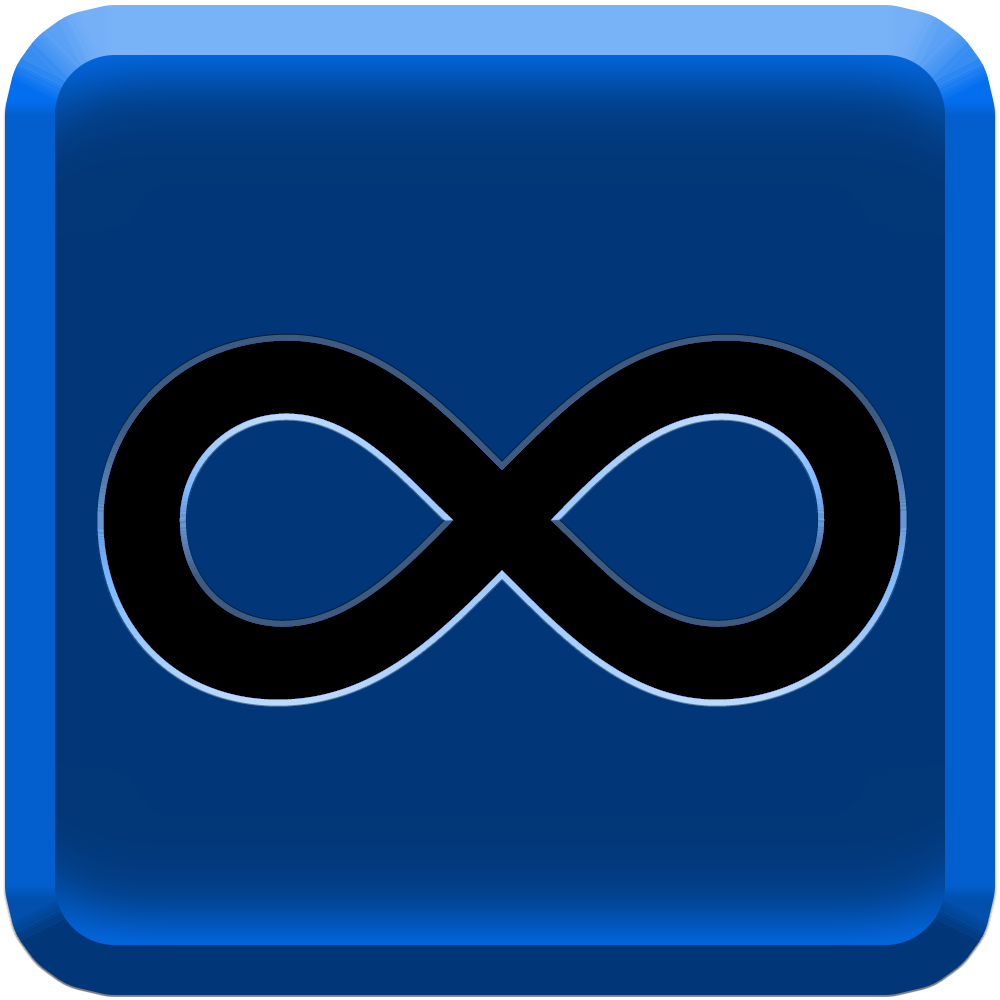
<style>
.page{position:relative;width:1000px;height:1000px;background:#013778}
.page>*{position:absolute;margin:0}
.t1{font:1211.5px "MyriadPro-Regular";color:#000000}
</style>
<div class="page">
<p class="t1" style="left:103px;top:340px;width:798px;height:360px">∞</p>
</div>
